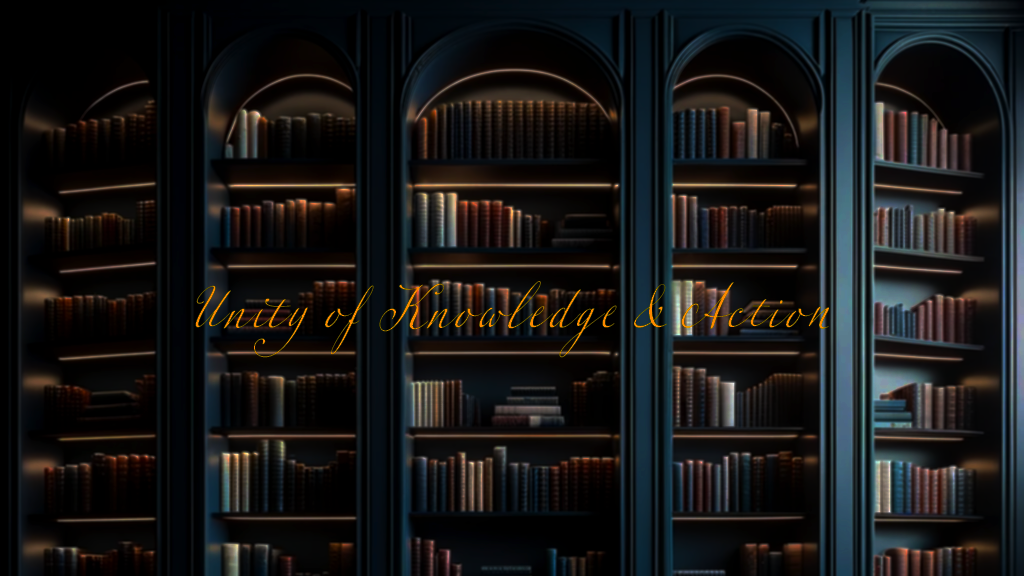
<style>
.page{position:relative;width:1024px;height:576px}
.page>*{position:absolute;margin:0}
.t1{font:60px "LeanderScriptPro-Regular";letter-spacing:0.05em;color:#ff8900}
</style>
<div class="page">
<p class="t1" style="left:195px;top:281px;width:634px;height:77px">Unity of Knowledge &amp; Action</p>
</div>
